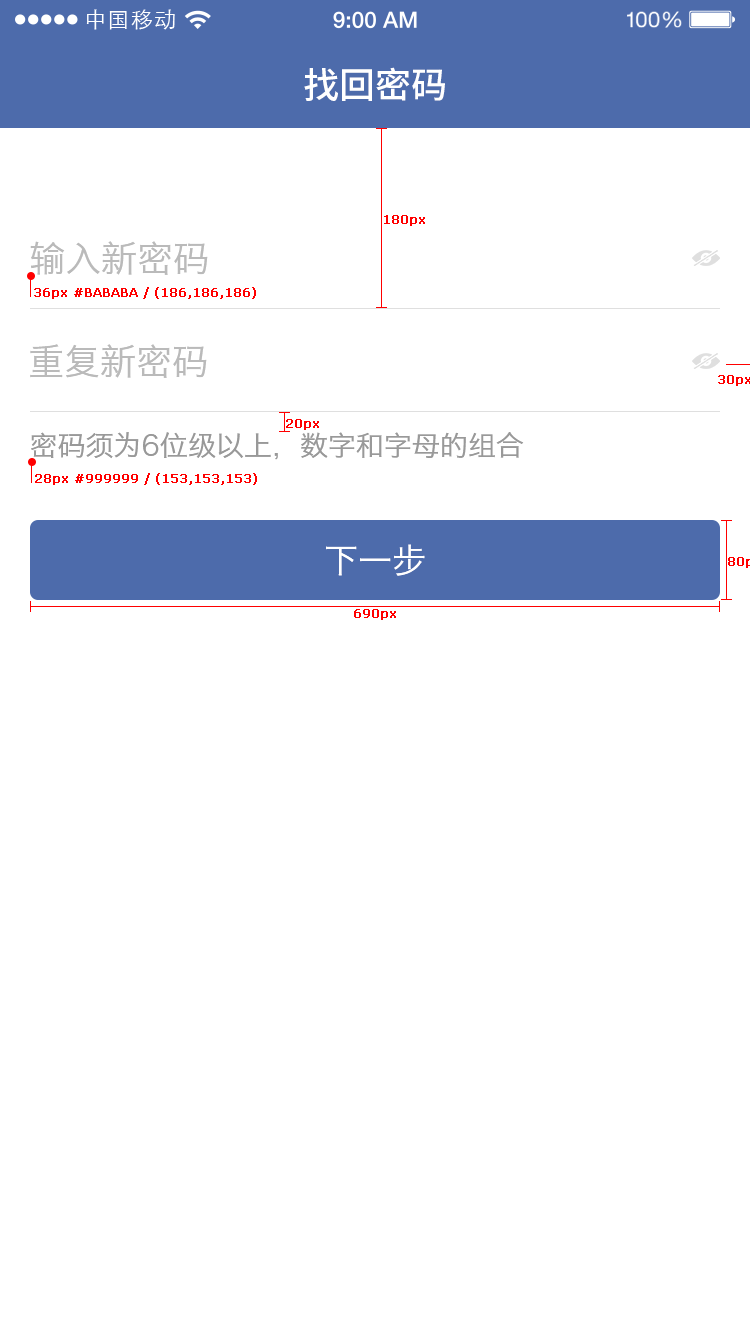
<style>
.page{position:relative;width:750px;height:1334px;background:#ffffff}
.page>*{position:absolute;margin:0}
.t1{font:21.9px "STXihei";letter-spacing:0.04em;color:#ffffff}
.t2{font:36px "NotoSansHans-Medium";color:#ffffff}
.t3{font:12px "Verdana";color:#ff0000;font-weight:bold}
.t4{font:36px "HiraginoSansGB-W3";color:#bababa}
.t5{font:28px "HiraginoSansGB-W3";color:#999999}
.t6{font:34px "HiraginoSansGB-W3";color:#ffffff}
</style>
<div class="page">
<p class="t1" style="left:86px;top:9px;width:89px;height:21px">中国移动</p>
<p class="t2" style="left:304px;top:67px;width:141px;height:34px">找回密码</p>
<p class="t3" style="left:384px;top:215px;width:41px;height:11px">180px</p>
<p class="t4" style="left:30px;top:241px;width:178px;height:34px">输入新密码</p>
<p class="t3" style="left:34px;top:287px;width:222px;height:12px">36px #BABABA / (186,186,186)</p>
<p class="t4" style="left:30px;top:344px;width:177px;height:34px">重复新密码</p>
<p class="t3" style="left:718px;top:375px;width:33px;height:11px">30px</p>
<p class="t3" style="left:286px;top:419px;width:33px;height:11px">20px</p>
<p class="t5" style="left:31px;top:432px;width:493px;height:28px">密码须为6位级以上，数字和字母的组合</p>
<p class="t3" style="left:35px;top:473px;width:222px;height:12px">28px #999999 / (153,153,153)</p>
<p class="t6" style="left:326px;top:544px;width:99px;height:32px">下一步</p>
<p class="t3" style="left:354px;top:609px;width:42px;height:11px">690px</p>
</div>
